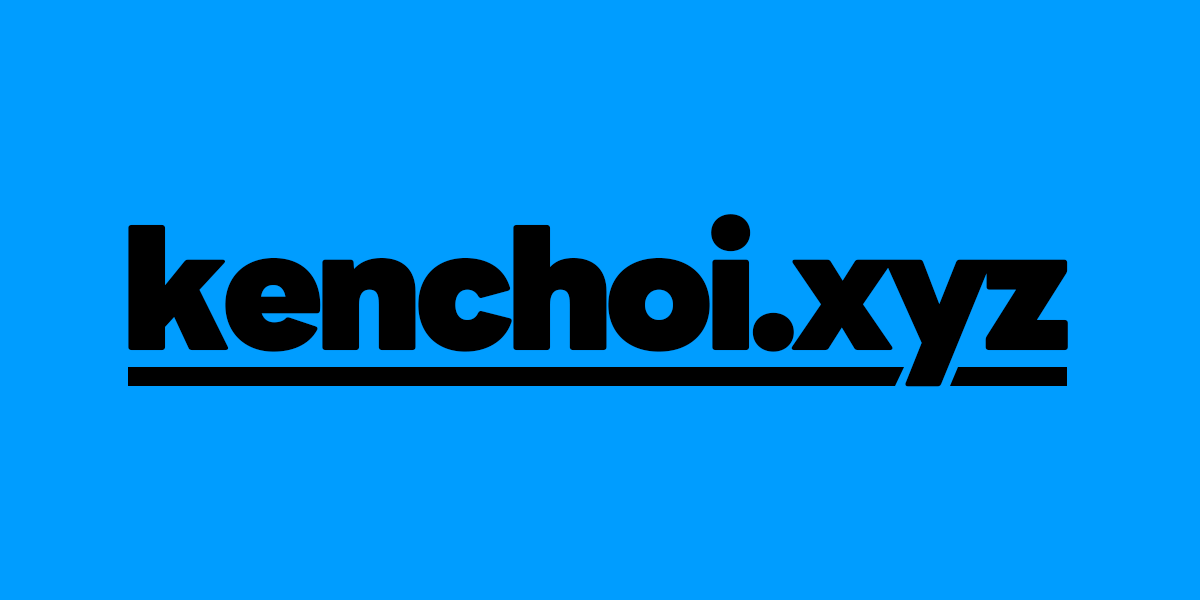
<style>
.page{position:relative;width:1200px;height:600px;background:#009dff}
.page>*{position:absolute;margin:0}
.t1{font:166.7px "LINESeedSans-Heavy";letter-spacing:-0.06em;color:#000000}
</style>
<div class="page">
<p class="t1" style="left:128px;top:214px;width:940px;height:173px">kenchoi.xyz</p>
</div>
